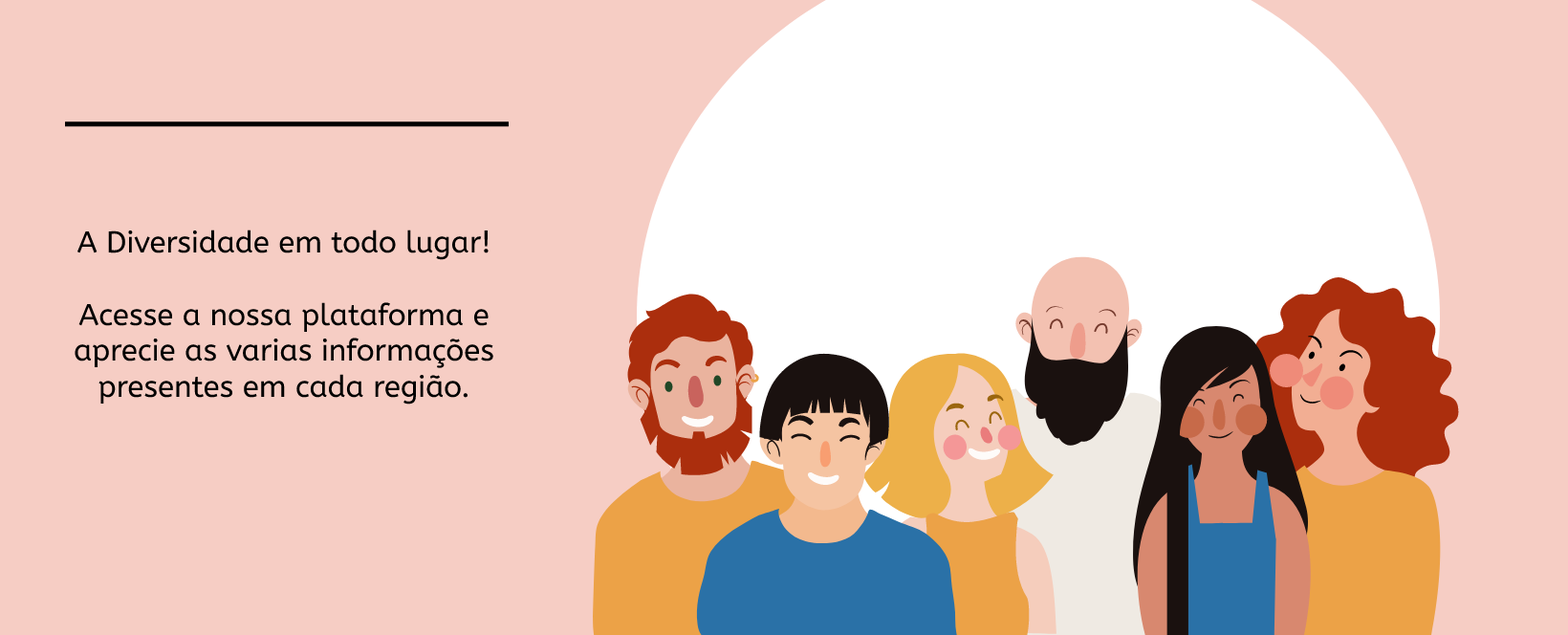
<style>
.page{position:relative;width:1568px;height:635px;background:#f6cdc4}
.page>*{position:absolute;margin:0}
.t1{font:30px "ABeeZee-Regular";color:#000000}
</style>
<div class="page">
<p class="t1" style="left:75px;top:229px;width:418px;height:175px;text-align:center">A Diversidade em todo lugar!<br><br>Acesse a nossa plataforma e aprecie as varias informações presentes em cada região.</p>
</div>
